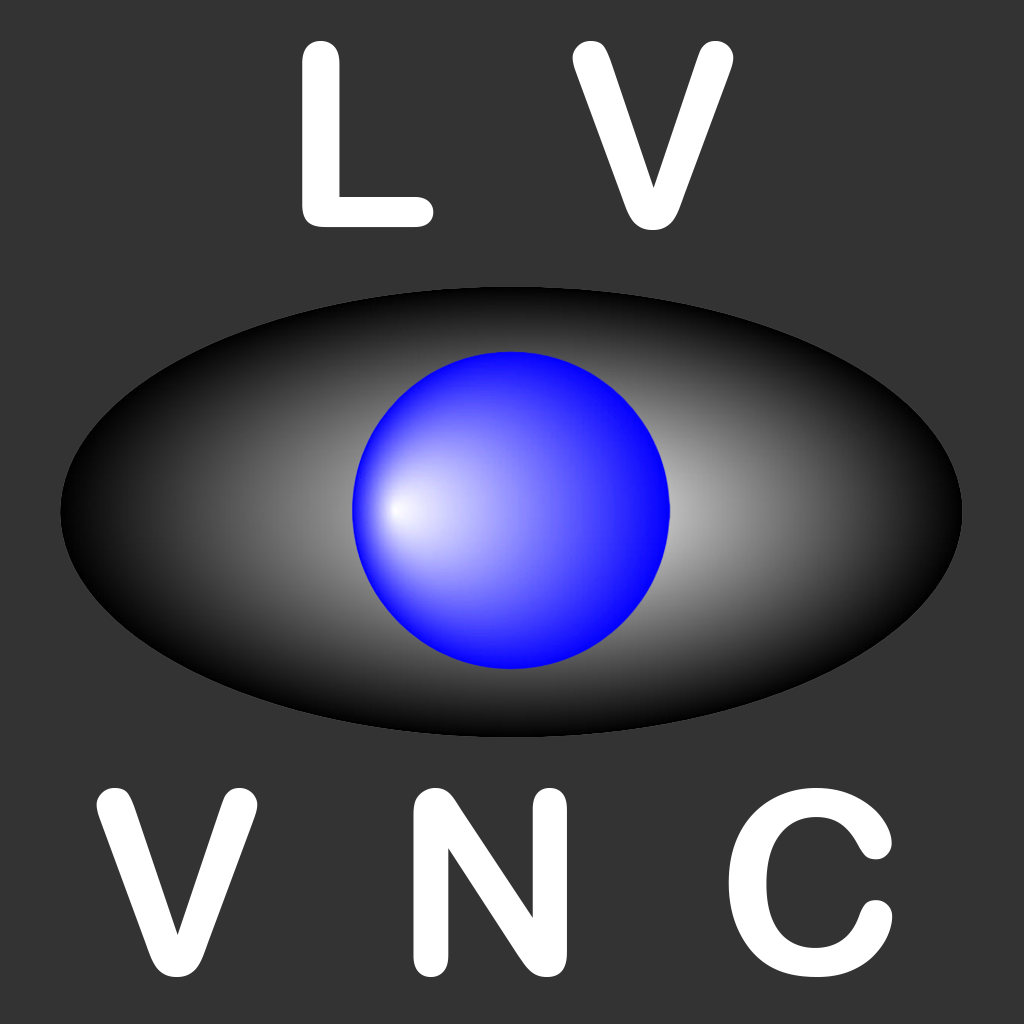
<style>
.page{position:relative;width:1024px;height:1024px;background:#333333}
.page>*{position:absolute;margin:0}
.t1{font:256px "ArialRoundedMTBold";color:#ffffff}
</style>
<div class="page">
<p class="t1" style="left:302px;top:41px;width:432px;height:189px">L  V</p>
<p class="t1" style="left:96px;top:788px;width:797px;height:189px">V  N  C</p>
</div>
